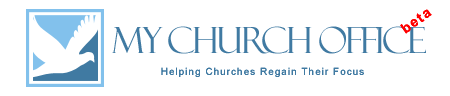
<style>
.page{position:relative;width:450px;height:96px;background:#ffffff}
.page>*{position:absolute;margin:0}
.t1{font:14px "Arial-BoldMT";letter-spacing:0.1em;color:#ff0000}
.t2{font:36px "FelixTitlingMT";letter-spacing:-0.075em;color:#407aa2}
.t3{font:10px "ArialMT";letter-spacing:0.1em;color:#407aa2}
</style>
<div class="page">
<p class="t1" style="left:400px;top:9px;width:32px;height:25px;rotate:-35deg">beta</p>
<p class="t2" style="left:112px;top:26px;width:314px;height:28px">My Church Office</p>
<p class="t3" style="left:161px;top:67px;width:203px;height:10px">Helping Churches Regain Their Focus</p>
</div>
